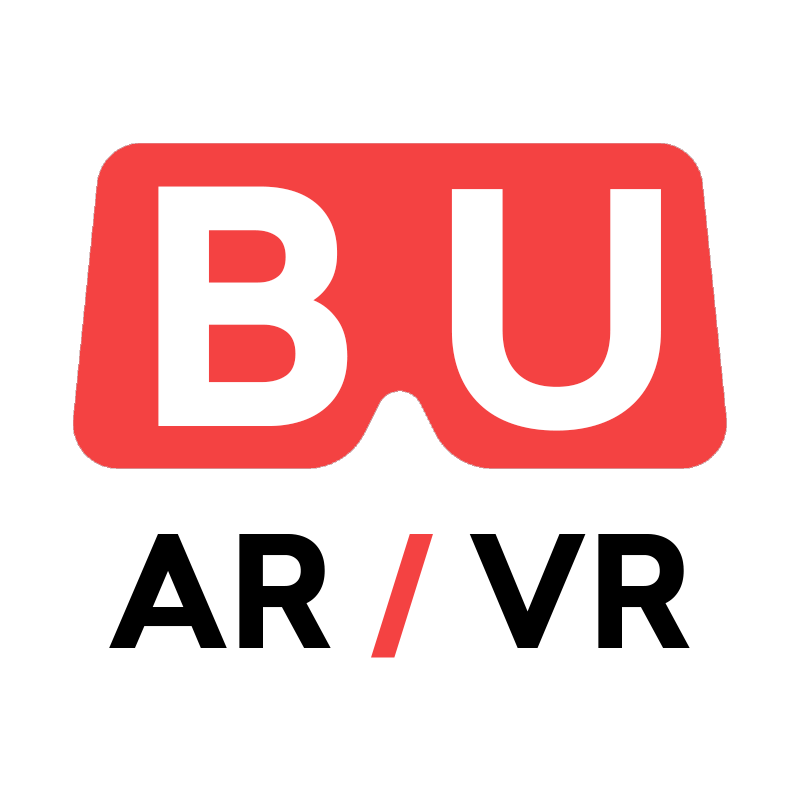
<style>
.page{position:relative;width:800px;height:800px;background:#ffffff}
.page>*{position:absolute;margin:0}
.t1{font:319.7px "Sailec-Bold";color:#ffffff}
.t2{font:317.8px "Sailec-Bold";color:#ffffff;scale:1.03 1}
.t3{font:152px "Sailec-Bold";color:#000000}
.t4{font:152px "Sailec-Bold";color:#f44242}
</style>
<div class="page">
<p class="t1" style="left:158px;top:186px;width:190px;height:240px">B</p>
<p class="t2" style="left:451px;top:189px;width:210px;height:242px">U</p>
<p class="t3" style="left:109px;top:534px;width:581px;height:124px">AR <span class="t4">/</span> VR</p>
</div>
